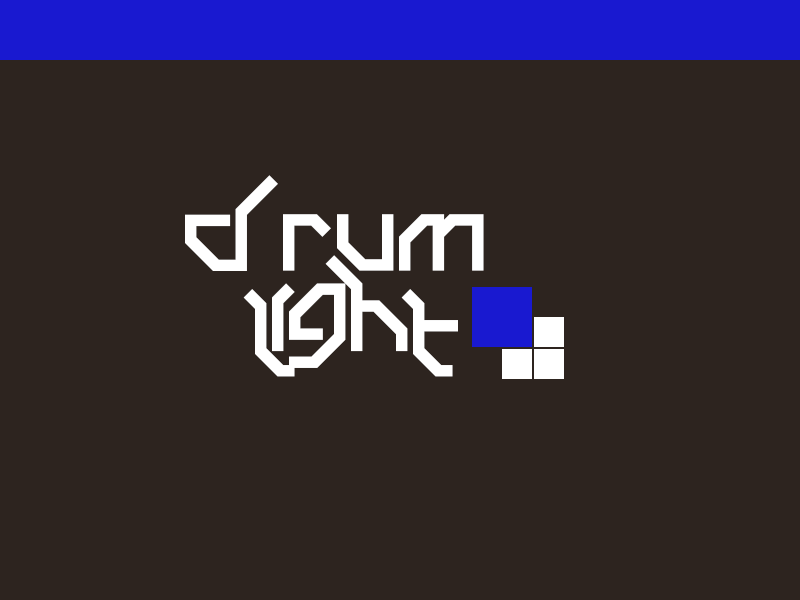
<style>
.page{position:relative;width:800px;height:600px;background:#2d241f}
.page>*{position:absolute;margin:0}
.t1{font:180px "Drum-and-Bass-LDR";color:#ffffff}
</style>
<div class="page">
<p class="t1" style="left:185px;top:175px;width:299px;height:96px">drum</p>
<p class="t1" style="left:243px;top:255px;width:215px;height:122px">light</p>
</div>
